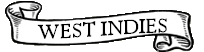
<style>
.page{position:relative;width:204px;height:52px;background:#ffffff}
.page>*{position:absolute;margin:0}
.t1{font:24px "Perpetua";color:#000000}
</style>
<div class="page">
<p class="t1" style="left:37px;top:18px;width:130px;height:21px">WEST INDIES</p>
</div>
